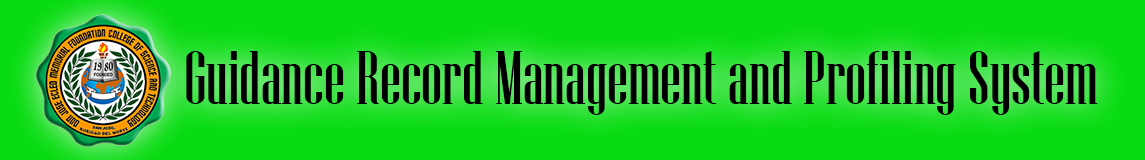
<style>
.page{position:relative;width:1145px;height:160px;background:#06db10}
.page>*{position:absolute;margin:0}
.t1{font:76px "NiagaraSolid-Reg";color:#000000}
</style>
<div class="page">
<p class="t1" style="left:186px;top:51px;width:912px;height:64px">Guidance Record Management and Profiling System</p>
</div>
